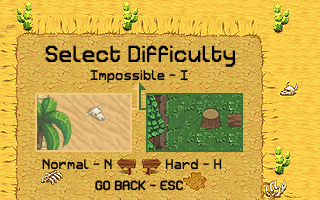
<style>
.page{position:relative;width:320px;height:200px}
.page>*{position:absolute;margin:0}
.t1{font:20.8px "Retron2000";color:#000000}
.t2{font:12.5px "Retron2000";color:#000000}
.t3{font:11.8px "Retron2000";color:#000000}
</style>
<div class="page">
<p class="t1" style="left:45px;top:45px;width:190px;height:22px">Select Difficulty</p>
<p class="t2" style="left:90px;top:70px;width:98px;height:13px">Impossible - I</p>
<p class="t3" style="left:95px;top:180px;width:89px;height:11px">GO BACK - ESC</p>
</div>
